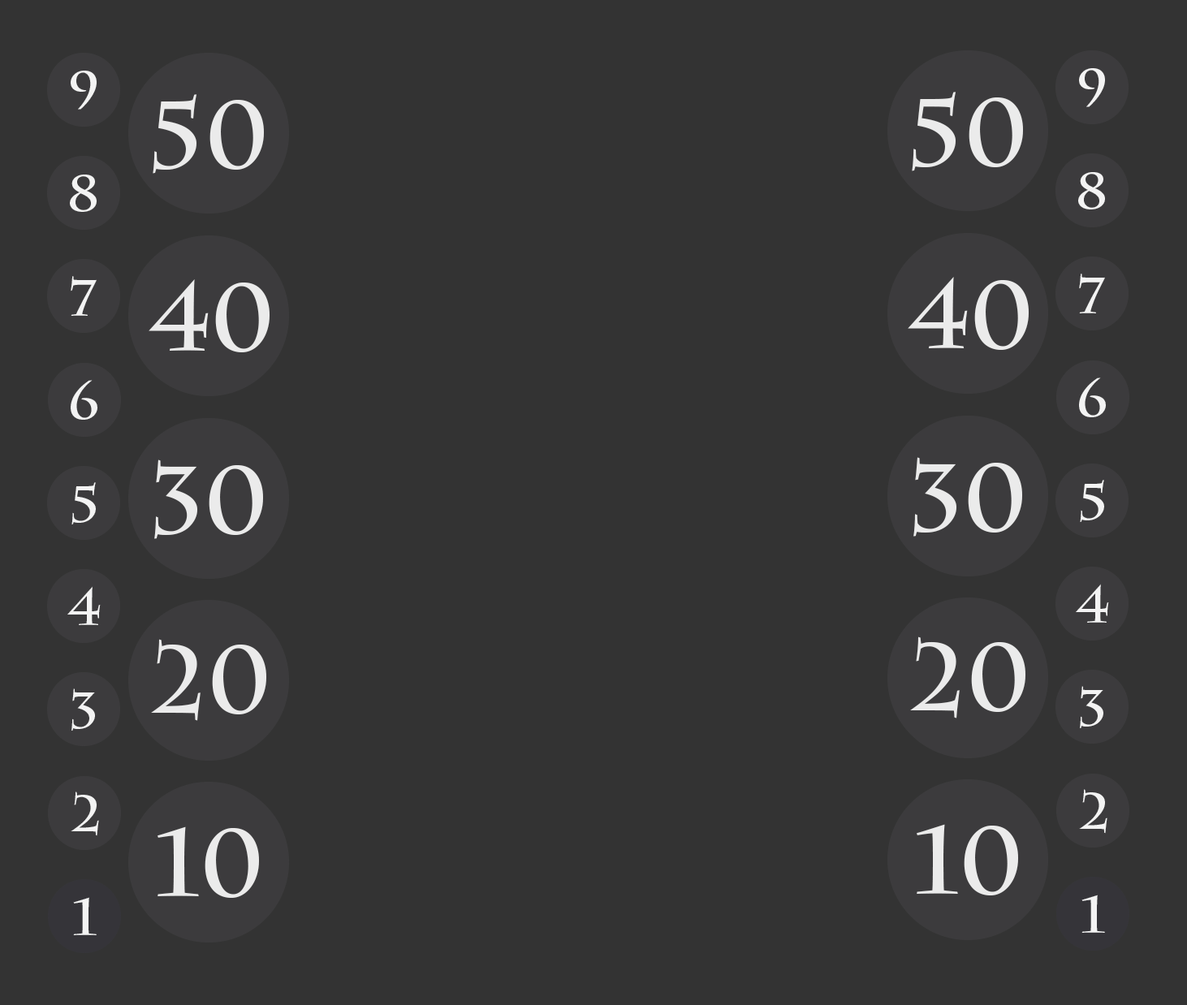
<style>
.page{position:relative;width:1187px;height:1005px;background:#333333}
.page>*{position:absolute;margin:0}
.t1{font:51.5px "CharlemagneStd-Bold";color:#f3f3f3}
.t2{font:95.1px "CharlemagneStd-Bold";color:#f3f3f3}
.t3{font:51.5px "CharlemagneStd-Bold";color:#f3f3f3;scale:1.03 1}
.t4{font:94.8px "CharlemagneStd-Bold";color:#f3f3f3}
</style>
<div class="page">
<p class="t1" style="left:71px;top:71px;width:26px;height:39px">9</p>
<p class="t1" style="left:1079px;top:68px;width:26px;height:39px">9</p>
<p class="t2" style="left:153px;top:94px;width:111px;height:80px;opacity:0.95">50</p>
<p class="t2" style="left:912px;top:92px;width:111px;height:79px;opacity:0.95">50</p>
<p class="t1" style="left:1078px;top:172px;width:27px;height:37px">8</p>
<p class="t1" style="left:70px;top:175px;width:27px;height:37px">8</p>
<p class="t1" style="left:71px;top:276px;width:26px;height:40px">7</p>
<p class="t2" style="left:149px;top:279px;width:120px;height:73px;opacity:0.95">40</p>
<p class="t2" style="left:907px;top:277px;width:121px;height:73px;opacity:0.95">40</p>
<p class="t1" style="left:1079px;top:274px;width:26px;height:39px">7</p>
<p class="t1" style="left:1079px;top:377px;width:27px;height:40px">6</p>
<p class="t1" style="left:71px;top:380px;width:26px;height:40px">6</p>
<p class="t2" style="left:154px;top:459px;width:109px;height:80px;opacity:0.95">30</p>
<p class="t2" style="left:913px;top:457px;width:109px;height:80px;opacity:0.95">30</p>
<p class="t1" style="left:71px;top:482px;width:25px;height:42px">5</p>
<p class="t1" style="left:1080px;top:480px;width:24px;height:42px">5</p>
<p class="t1" style="left:67px;top:586px;width:34px;height:39px">4</p>
<p class="t1" style="left:1075px;top:584px;width:34px;height:39px">4</p>
<p class="t2" style="left:151px;top:639px;width:115px;height:82px;opacity:0.95">20</p>
<p class="t2" style="left:910px;top:636px;width:115px;height:82px;opacity:0.95">20</p>
<p class="t1" style="left:71px;top:688px;width:24px;height:43px">3</p>
<p class="t1" style="left:1080px;top:686px;width:23px;height:42px">3</p>
<p class="t3" style="left:71px;top:791px;width:28px;height:45px">2</p>
<p class="t3" style="left:1079px;top:789px;width:28px;height:45px">2</p>
<p class="t4" style="left:157px;top:826px;width:102px;height:72px;opacity:0.95">10</p>
<p class="t4" style="left:916px;top:824px;width:102px;height:71px;opacity:0.95">10</p>
<p class="t1" style="left:73px;top:897px;width:24px;height:38px">1</p>
<p class="t1" style="left:1081px;top:894px;width:24px;height:39px">1</p>
</div>
